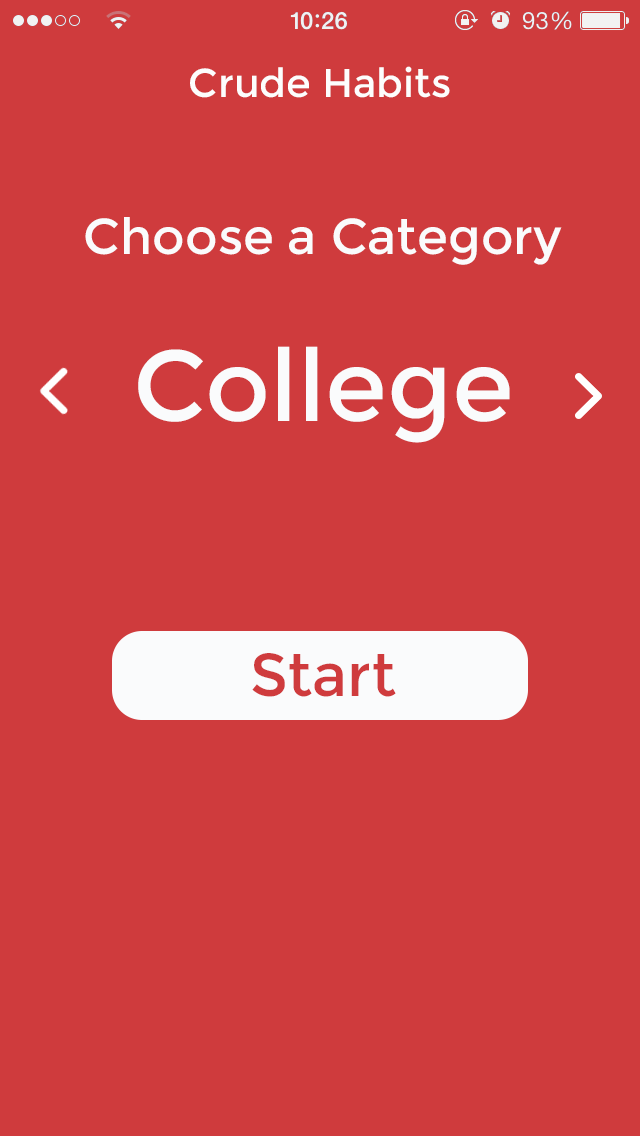
<style>
.page{position:relative;width:640px;height:1136px;background:#cf3b3d}
.page>*{position:absolute;margin:0}
.t1{font:40px "Montserrat-Regular";color:#fdfdfd}
.t2{font:50px "Montserrat-Regular";color:#fafbfc}
.t3{font:100px "Montserrat-Regular";color:#fafbfc}
.t4{font:60px "Montserrat-Regular";color:#cf3b3d}
</style>
<div class="page">
<p class="t1" style="left:190px;top:66px;width:260px;height:32px">Crude Habits</p>
<p class="t2" style="left:85px;top:217px;width:477px;height:48px">Choose a Category</p>
<p class="t3" style="left:138px;top:346px;width:372px;height:97px">College</p>
<p class="t4" style="left:252px;top:653px;width:144px;height:44px">Start</p>
</div>
